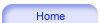
<style>
.page{position:relative;width:100px;height:23px;background:#e1e4fc}
.page>*{position:absolute;margin:0}
.t1{font:11px "ArialMT";color:#092ff6}
</style>
<div class="page">
<p class="t1" style="left:37px;top:12px;width:28px;height:8px">Home</p>
</div>
